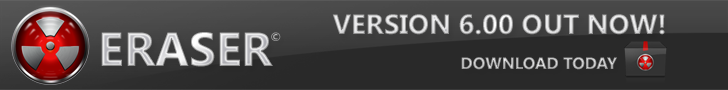
<style>
.page{position:relative;width:728px;height:90px;background:#292929}
.page>*{position:absolute;margin:0}
.t1{font:27.7px "SegoeUI-Bold"}
.t2{font:48px "SegoeUI-Bold"}
.t3{font:12px "SegoeUI-Bold";color:#b1b1b1}
.t4{font:16.5px "SegoeUI-Bold"}
</style>
<div class="page">
<p class="t1" style="left:332px;top:14px;width:333px;height:21px">VERSION 6.00 OUT NOW!</p>
<p class="t2" style="left:101px;top:32px;width:172px;height:35px">ERASER</p>
<p class="t3" style="left:271px;top:32px;width:10px;height:9px">©</p>
<p class="t4" style="left:461px;top:57px;width:156px;height:13px">DOWNLOAD TODAY</p>
</div>
